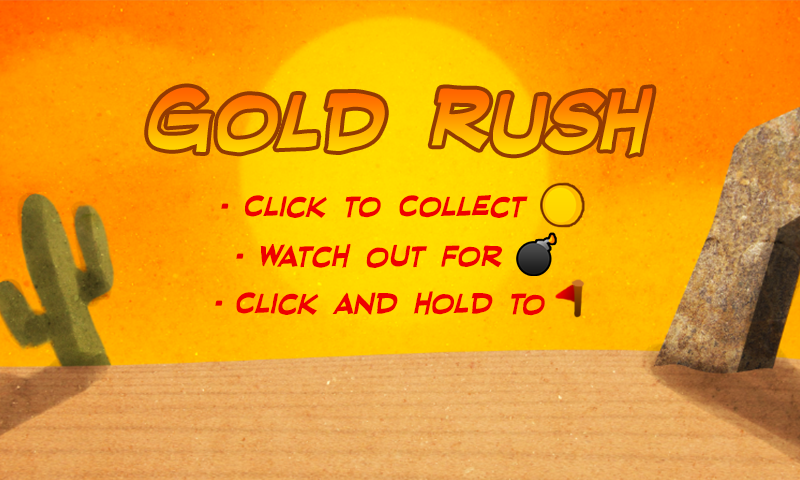
<style>
.page{position:relative;width:800px;height:480px}
.page>*{position:absolute;margin:0}
.t1{font:100px "RedStateBlueStateBB-Bold"}
.t2{font:36px "RedStateBlueStateBB-Bold";color:#ee0000}
</style>
<div class="page">
<p class="t1" style="left:148px;top:87px;width:505px;height:68px">Gold RUsh</p>
<p class="t2" style="left:244px;top:195px;width:284px;height:23px">Click to Collect</p>
<p class="t2" style="left:221px;top:203px;width:8px;height:6px">.</p>
<p class="t2" style="left:260px;top:244px;width:242px;height:24px">Watch Out for</p>
<p class="t2" style="left:236px;top:253px;width:8px;height:6px">.</p>
<p class="t2" style="left:236px;top:291px;width:309px;height:25px">Click and hold tO</p>
<p class="t2" style="left:215px;top:300px;width:8px;height:6px">.</p>
</div>
